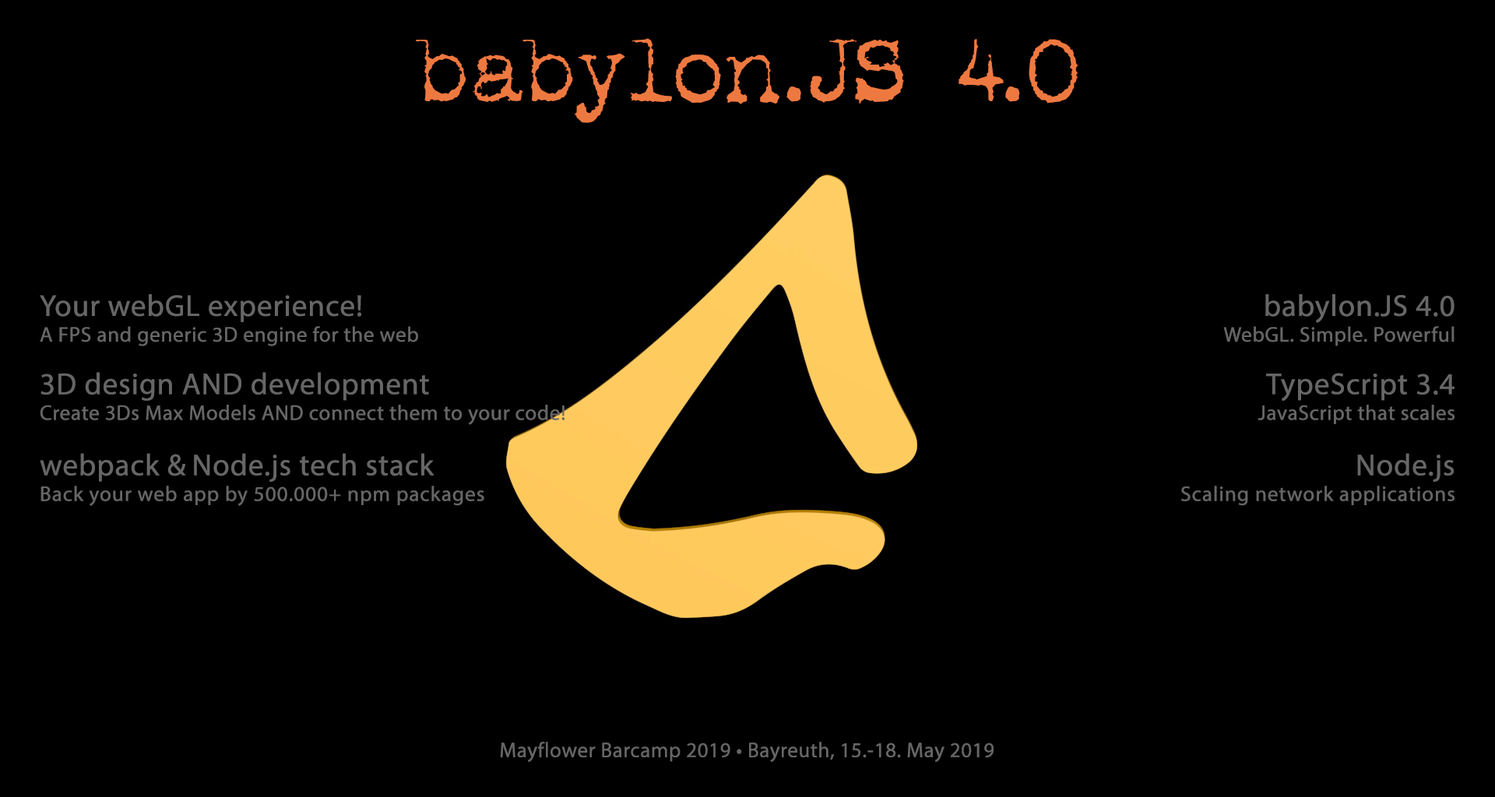
<style>
.page{position:relative;width:1495px;height:797px;background:#010001}
.page>*{position:absolute;margin:0}
.t1{font:102.7px "Pookiefair";color:#ee7940}
.t2{font:21px/25.6px "MyriadPro-Regular";color:#666666;font-weight:bold}
.t3{font:30.4px/52.7px "MyriadPro-Regular";color:#666666;font-weight:bold}
.t4{font:30.4px/55.5px "MyriadPro-Regular";color:#666666;font-weight:bold}
.t5{font:21px/25.6px "MyriadPro-Regular";letter-spacing:0.012em;color:#666666;font-weight:bold}
.t6{font:21px "MyriadPro-Regular";color:#666666;font-weight:bold}
</style>
<div class="page">
<p class="t1" style="left:416px;top:38px;width:663px;height:85px">babylon.JS 4.0</p>
<p class="t2" style="left:40px;top:294px;width:525px;height:212px"><span class="t3">Your webGL experience!<br></span>A FPS and generic 3D engine for the web<br><span class="t3">3D design AND development<br></span>Create 3Ds Max Models AND connect them to your code!<br><span class="t4">webpack &amp; Node.js tech stack<br></span><span class="t5">Back your web app by 500.000+ npm packages</span></p>
<p class="t5" style="left:1181px;top:294px;width:274px;height:212px;text-align:right"><span class="t3">babylon.JS 4.0<br></span><span class="t2">WebGL. Simple. Powerful<br></span><span class="t3">TypeScript 3.4<br></span><span class="t2">JavaScript that scales<br></span><span class="t4">Node.js<br></span>Scaling network applications</p>
<p class="t6" style="left:500px;top:742px;width:494px;height:20px">Mayflower Barcamp 2019 • Bayreuth, 15.-18. May 2019</p>
</div>
